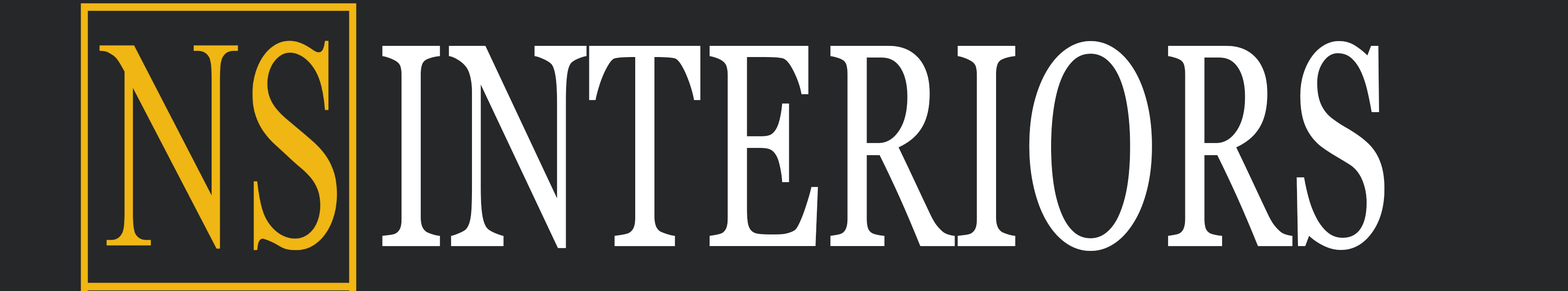
<style>
.page{position:relative;width:1568px;height:291px;background:#262729}
.page>*{position:absolute;margin:0}
.t1{font:288.7px "Vani";color:#ffffff;scale:0.64 1}
</style>
<div class="page">
<p class="t1" style="left:382px;top:41px;width:1002px;height:210px">INTERIORS</p>
</div>
